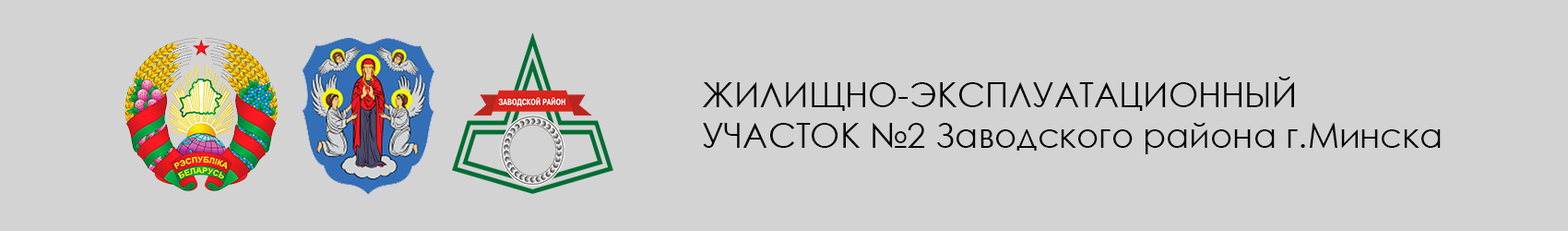
<style>
.page{position:relative;width:1568px;height:231px;background:#d3d3d3}
.page>*{position:absolute;margin:0}
.t1{font:34.1px "CenturyGothic";color:#000000}
</style>
<div class="page">
<p class="t1" style="left:702px;top:77px;width:739px;height:77px;text-align:right">ЖИЛИЩНО-ЭКСПЛУАТАЦИОННЫЙ <br>УЧАСТОК №2 Заводского района г.Минска</p>
</div>
